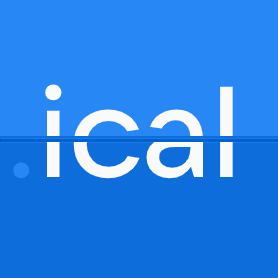
<style>
.page{position:relative;width:278px;height:278px;background:#0d6ddb}
.page>*{position:absolute;margin:0}
.t1{font:128px "VKSansDisplay-Medium";color:#fafafa}
.t2{font:128px "VKSansDisplay-Medium";color:#2787f5}
</style>
<div class="page">
<p class="t1" style="left:13px;top:84px;width:220px;height:95px"><span class="t2">.</span>ical</p>
</div>
